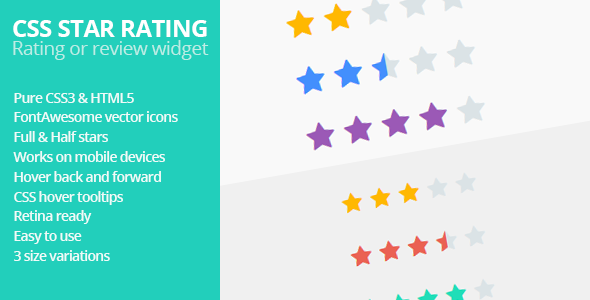
<style>
.page{position:relative;width:590px;height:300px;background:#22cfbb}
.page>*{position:absolute;margin:0}
.t1{font:24px "OpenSans-Bold";letter-spacing:-0.025em;color:#ffffff}
.t2{font:19px "OpenSans";letter-spacing:-0.025em;color:#bcede5}
.t3{font:14px "OpenSans-Semibold";letter-spacing:-0.05em;color:#ffffff}
</style>
<div class="page">
<p class="t1" style="left:13px;top:20px;width:194px;height:17px">CSS STAR RATING</p>
<p class="t2" style="left:13px;top:40px;width:196px;height:20px">Rating or review widget</p>
<p class="t3" style="left:13px;top:93px;width:165px;height:168px;opacity:0.9">Pure CSS3 &amp; HTML5<br>FontAwesome vector icons<br>Full &amp; Half stars<br>Works on mobile devices<br>Hover back and forward<br>CSS hover tooltips<br>Retina ready<br>Easy to use<br>3 size variations</p>
</div>
